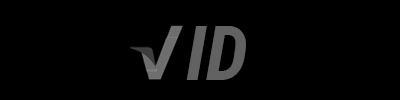
<style>
.page{position:relative;width:400px;height:100px;background:#000000}
.page>*{position:absolute;margin:0}
.t1{font:76px "RobotoCondensed-BoldItalic";color:#626262}
</style>
<div class="page">
<p class="t1" style="left:186px;top:26px;width:60px;height:54px">ID</p>
</div>
